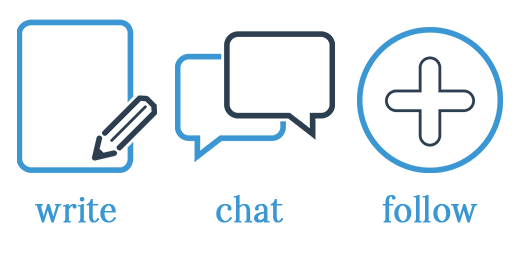
<style>
.page{position:relative;width:520px;height:260px;background:#ffffff}
.page>*{position:absolute;margin:0}
.t1{font:35.2px "Lora-Regular";color:#3b97d3;font-weight:bold;scale:0.91 1}
</style>
<div class="page">
<p class="t1" style="left:35px;top:197px;width:81px;height:26px">write</p>
<p class="t1" style="left:216px;top:195px;width:68px;height:28px">chat</p>
<p class="t1" style="left:382px;top:195px;width:96px;height:28px">follow</p>
</div>
